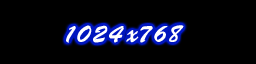
<style>
.page{position:relative;width:256px;height:64px;background:#000000}
.page>*{position:absolute;margin:0}
.t1{font:36px "DsSupasawatD";color:#ffffff}
</style>
<div class="page">
<p class="t1" style="left:66px;top:25px;width:118px;height:18px">1024x768</p>
</div>
